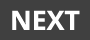
<style>
.page{position:relative;width:90px;height:40px;background:#404040}
.page>*{position:absolute;margin:0}
.t1{font:26.7px "OpenSans-Bold";color:#ffffff}
</style>
<div class="page">
<p class="t1" style="left:12px;top:10px;width:68px;height:20px">NEXT</p>
</div>
